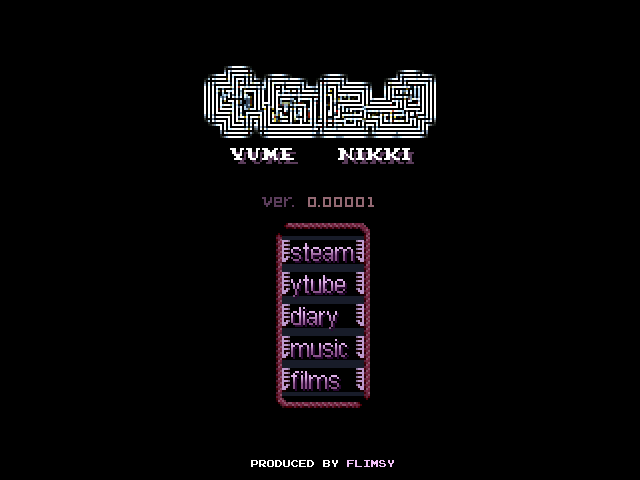
<style>
.page{position:relative;width:640px;height:480px;background:#000000}
.page>*{position:absolute;margin:0}
.t1{font:25px "C&CRedAlert[LAN]"}
.t2{font:8px "PressStartK";color:#ffffff}
.t3{font:8px "PressStartK";color:#f4c3fa}
</style>
<div class="page">
<p class="t1" style="left:291px;top:243px;width:62px;height:18px">steam</p>
<p class="t1" style="left:291px;top:275px;width:54px;height:22px">ytube</p>
<p class="t1" style="left:291px;top:307px;width:46px;height:22px">diary</p>
<p class="t1" style="left:291px;top:339px;width:56px;height:18px">music</p>
<p class="t1" style="left:291px;top:371px;width:48px;height:18px">films</p>
<p class="t2" style="left:251px;top:460px;width:143px;height:7px">PRODUCED BY <span class="t3">FLIMSY</span></p>
</div>
